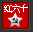
<style>
.page{position:relative;width:33px;height:32px;background:#c50000}
.page>*{position:absolute;margin:0}
.t1{font:10.4px "SimSun";letter-spacing:-0.25em;color:#ffffff}
</style>
<div class="page">
<p class="t1" style="left:4px;top:4px;width:24px;height:9px">红六十</p>
</div>
